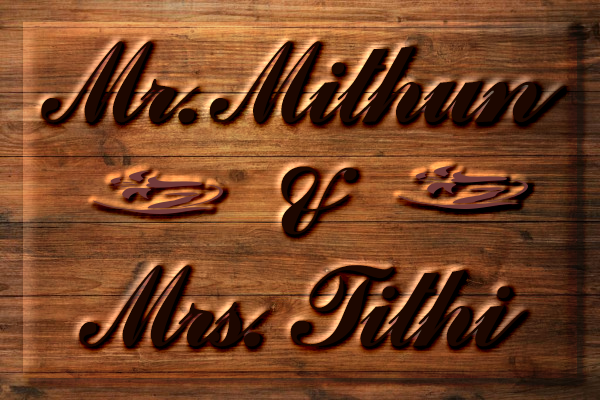
<style>
.page{position:relative;width:600px;height:400px}
.page>*{position:absolute;margin:0}
.t1{font:128px/112px "CommercialScriptBT-Regular";letter-spacing:-0.05em;color:#1d0700}
</style>
<div class="page">
<p class="t1" style="left:41px;top:41px;width:524px;height:306px;text-align:center">Mr. Mithun <br>&amp; <br>Mrs. Tithi</p>
</div>
